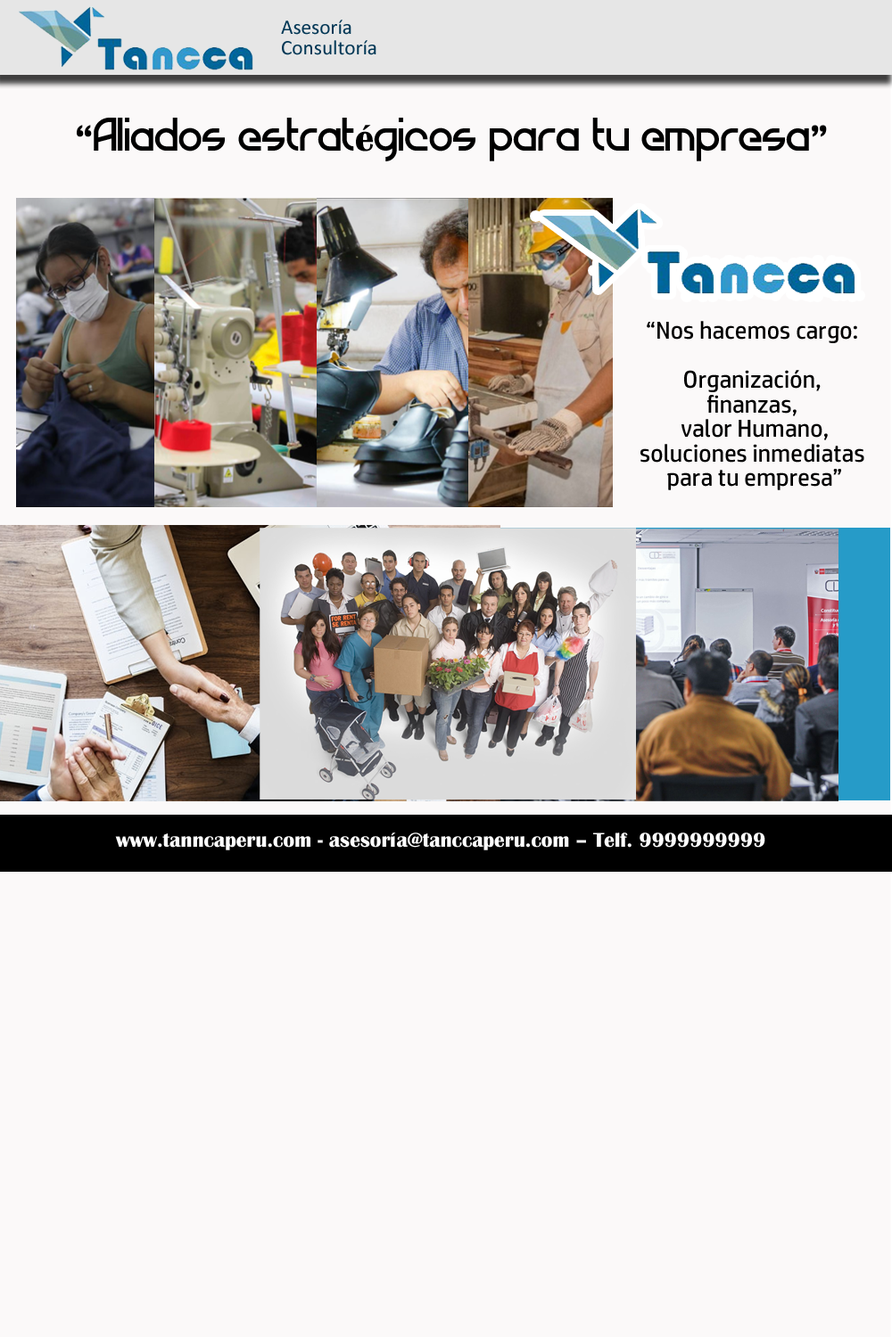
<style>
.page{position:relative;width:892px;height:1337px;background:#fbf9f9}
.page>*{position:absolute;margin:0}
.t1{font:20.7px/20.7px "Calibri";color:#033856}
.t2{font:37.7px "Atiba-Regular";color:#000000}
.t3{font:37.7px "BritannicBold";color:#000000}
.t4{font:24.5px/24.5px "HPSimplified-Regular";color:#000000}
.t5{font:20.7px "BritannicBold";color:#ffffff}
</style>
<div class="page">
<p class="t1" style="left:281px;top:20px;width:95px;height:35px">Asesoría<br>Consultoría</p>
<p class="t2" style="left:77px;top:118px;width:750px;height:43px"><span class="t3">“</span>Aliados estrat<span class="t3">é</span>gicos para tu empresa<span class="t3">”</span></p>
<p class="t4" style="left:640px;top:321px;width:224px;height:169px;text-align:center">“Nos hacemos cargo:<br><br>Organización,<br>finanzas,<br> valor Humano,<br>soluciones inmediatas<br> para tu empresa”</p>
<p class="t5" style="left:115px;top:833px;width:650px;height:18px">www.tanncaperu.com - asesoría@tanccaperu.com – Telf. 9999999999</p>
</div>
